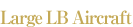
<style>
.page{position:relative;width:133px;height:27px;background:#ffffff}
.page>*{position:absolute;margin:0}
.t1{font:18px "RyuminPro-ExBold";letter-spacing:-0.08em;color:#c4a956;scale:0.94 1}
</style>
<div class="page">
<p class="t1" style="left:0px;top:10px;width:132px;height:17px">Large LB Aircraft</p>
</div>
